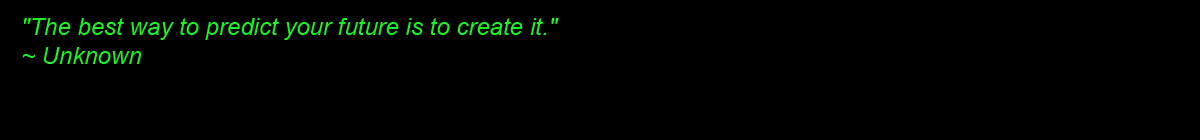
<style>
.page{position:relative;width:1200px;height:140px;background:#000000}
.page>*{position:absolute;margin:0}
.t1{font:24px "Arial-ItalicMT";color:#1af324}
</style>
<div class="page">
<p class="t1" style="left:22px;top:18px;width:537px;height:46px">"The best way to predict your future is to create it."<br>~ Unknown</p>
</div>
